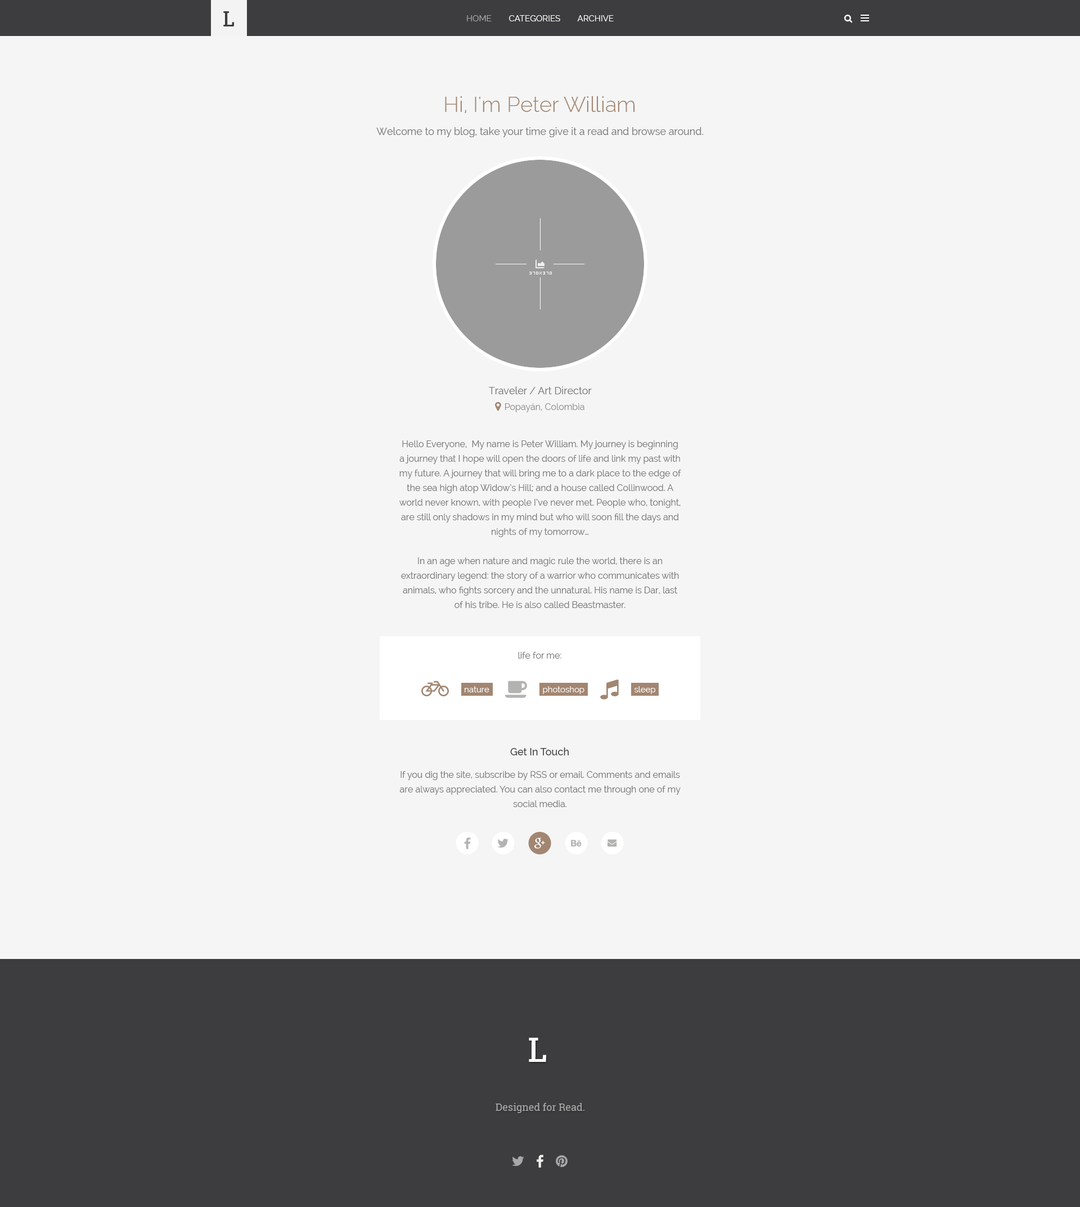
<style>
.page{position:relative;width:1080px;height:1207px;background:#f5f5f5}
.page>*{position:absolute;margin:0}
.t1{font:8.4px "Raleway";color:#ffffff}
.t2{font:8.4px "Raleway";color:#a8a8a8}
.t3{font:21.4px "Raleway-Light";color:#a28671}
.t4{font:10.1px "Raleway";color:#787878}
.t5{font:9px/14.6px "Raleway";color:#787878}
.t6{font:9px "Raleway";color:#787878}
.t7{font:8.4px "Raleway";color:#fefefe}
.t8{font:10.1px "Raleway-Medium";color:#4d4d4f}
.t9{font:34.9px "CaeciliaLTStd-Bold";color:#ffffff;text-transform:uppercase}
.t10{font:10.1px "RobotoSlab-Regular";color:#a8a8a8}
</style>
<div class="page">
<p class="t1" style="left:467px;top:15px;width:147px;height:6px"><span class="t2">HOME</span>        CATEGORIES        ARCHIVE</p>
<p class="t3" style="left:445px;top:96px;width:190px;height:17px">Hi, I'm Peter William</p>
<p class="t4" style="left:376px;top:127px;width:327px;height:10px">Welcome to my blog, take your time give it a read and browse around.</p>
<p class="t5" style="left:399px;top:440px;width:282px;height:168px;text-align:center">Hello Everyone,  My name is Peter William. My journey is beginning<br>a journey that I hope will open the doors of life and link my past with my future. A journey that will bring me to a dark place to the edge of the sea high atop Widow’s Hill; and a house called Collinwood. A world never known, with people I’ve never met. People who, tonight, are still only shadows in my mind but who will soon fill the days and nights of my tomorrow…<br><br>In an age when nature and magic rule the world, there is an extraordinary legend: the story of a warrior who communicates with animals, who fights sorcery and the unnatural. His name is Dar, last of his tribe. He is also called Beastmaster.</p>
<p class="t6" style="left:518px;top:652px;width:43px;height:7px">life for me:</p>
<p class="t7" style="left:465px;top:686px;width:24px;height:6px">nature</p>
<p class="t7" style="left:543px;top:686px;width:41px;height:8px">photoshop</p>
<p class="t7" style="left:634px;top:686px;width:21px;height:8px">sleep</p>
<p class="t8" style="left:510px;top:748px;width:59px;height:7px">Get In Touch</p>
<p class="t5" style="left:399px;top:771px;width:282px;height:36px;text-align:center">If you dig the site, subscribe by RSS or email. Comments and emails are always appreciated. You can also contact me through one of my social media.</p>
<p class="t9" style="left:529px;top:1038px;width:17px;height:24px">l</p>
<p class="t10" style="left:496px;top:1103px;width:88px;height:10px">Designed for Read.</p>
</div>
